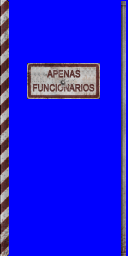
<style>
.page{position:relative;width:128px;height:256px;background:#0000ff}
.page>*{position:absolute;margin:0}
.t1{font:8.7px "ArialMT";letter-spacing:-0.05em;color:#593231;text-transform:uppercase;font-weight:bold}
.t2{font:8.7px "ArialMT";letter-spacing:-0.05em;color:#593231;text-transform:uppercase;font-weight:bold;scale:0.97 1}
</style>
<div class="page">
<p class="t1" style="left:47px;top:70px;width:34px;height:8px">apenas</p>
<p class="t2" style="left:33px;top:84px;width:62px;height:8px">funcionarios</p>
</div>
